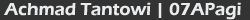
<style>
.page{position:relative;width:250px;height:20px;background:#333333}
.page>*{position:absolute;margin:0}
.t1{font:18px "ErasITC-Demi";color:#e9ebed}
</style>
<div class="page">
<p class="t1" style="left:4px;top:2px;width:237px;height:18px">Achmad Tantowi | 07APagi</p>
</div>
